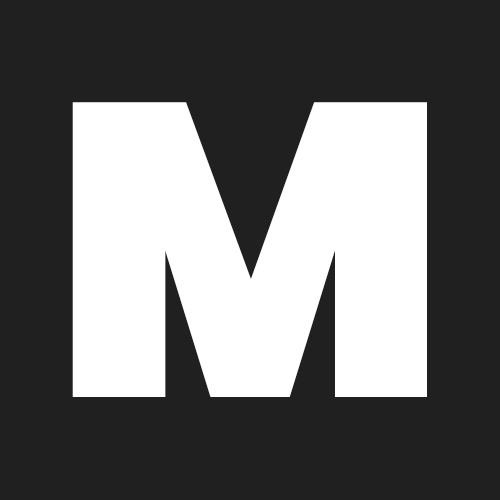
<style>
.page{position:relative;width:500px;height:500px;background:#202020}
.page>*{position:absolute;margin:0}
.t1{font:416.2px "Poppins-Black";color:#ffffff}
</style>
<div class="page">
<p class="t1" style="left:72px;top:102px;width:355px;height:295px">M</p>
</div>
